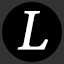
<style>
.page{position:relative;width:64px;height:64px;background:#000000}
.page>*{position:absolute;margin:0}
.t1{font:62.5px "AdobeDevanagari-Italic";color:#ffffff;font-weight:bold}
</style>
<div class="page">
<p class="t1" style="left:17px;top:11px;width:31px;height:39px">L</p>
</div>
